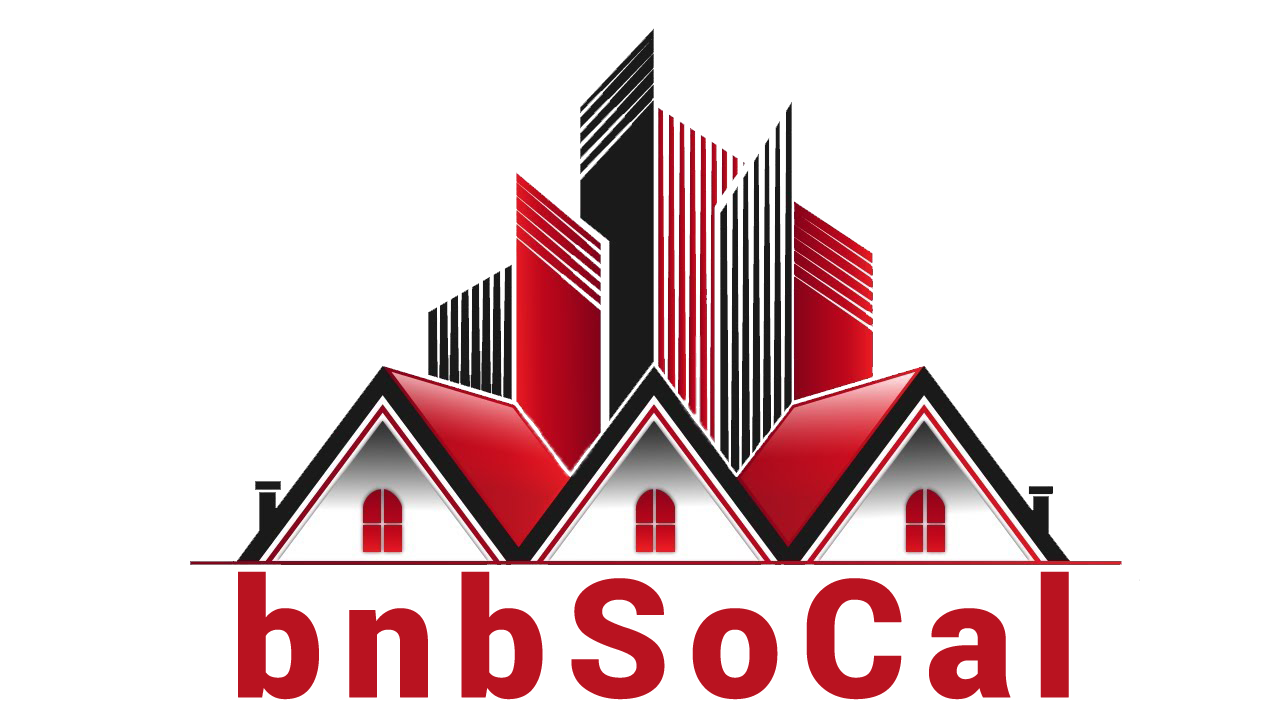
<style>
.page{position:relative;width:1280px;height:720px;background:#ffffff}
.page>*{position:absolute;margin:0}
.t1{font:164.3px "Roboto-Black";letter-spacing:0.091em;color:#b91320;font-weight:bold}
</style>
<div class="page">
<p class="t1" style="left:238px;top:571px;width:831px;height:129px">bnbSoCal</p>
</div>
